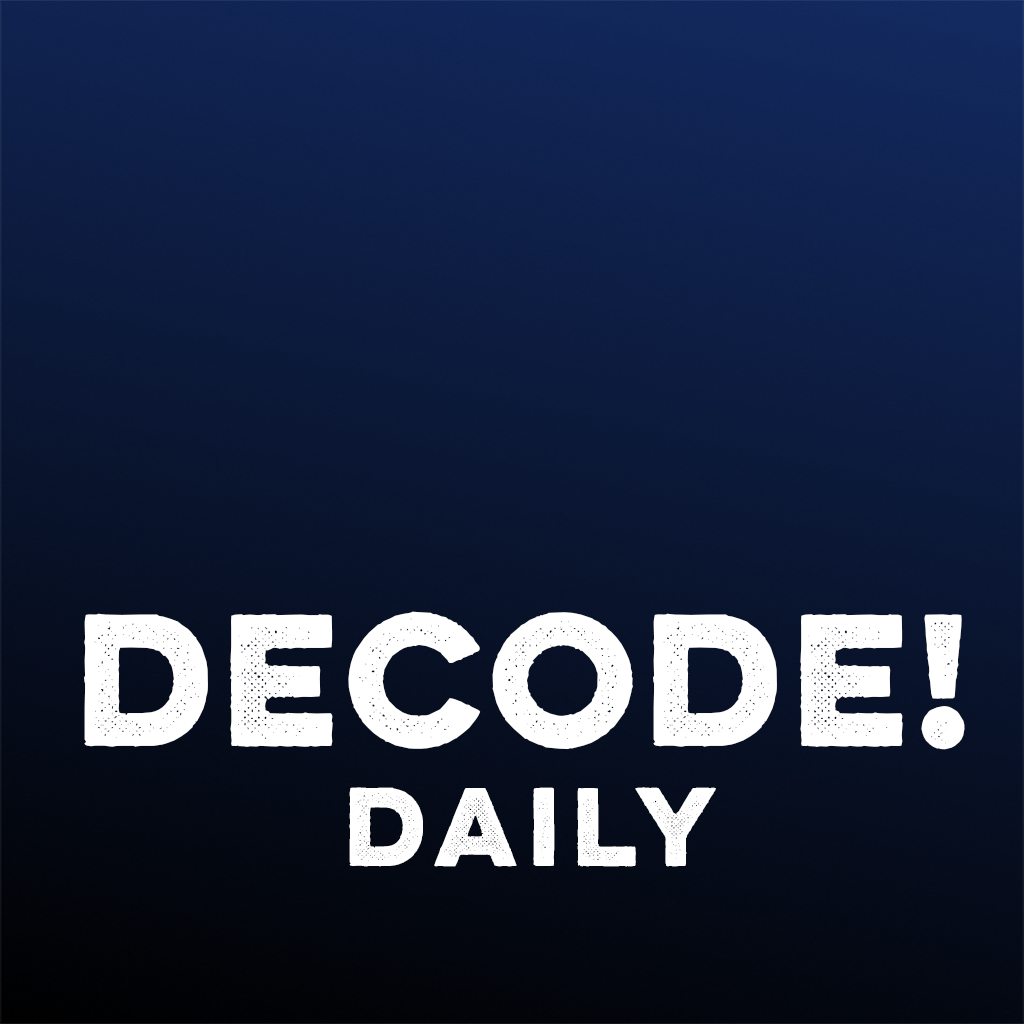
<style>
.page{position:relative;width:1024px;height:1024px}
.page>*{position:absolute;margin:0}
.t1{font:168px "LuloOne-Bold";letter-spacing:-0.16em;color:#ffffff}
.t2{font:100px "LuloOne-Bold";letter-spacing:-0.1em;color:#ffffff}
</style>
<div class="page">
<p class="t1" style="left:84px;top:611px;width:881px;height:256px;text-align:center">decode!<br><span class="t2">daily</span></p>
</div>
